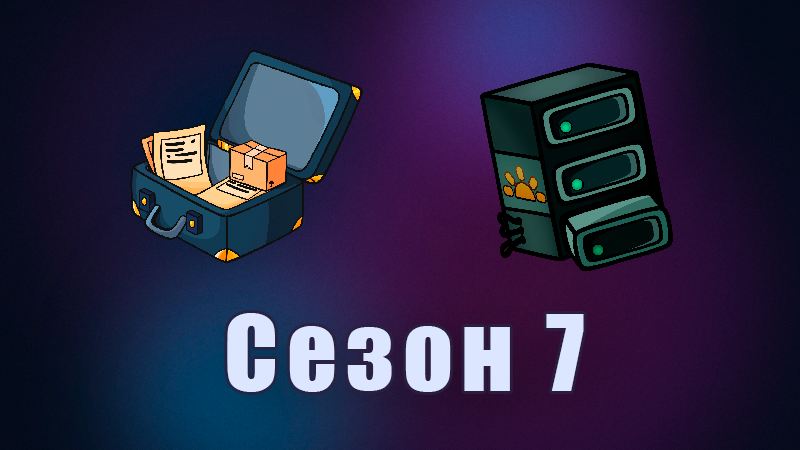
<style>
.page{position:relative;width:800px;height:450px}
.page>*{position:absolute;margin:0}
.t1{font:98.4px "Impact";letter-spacing:0.08em;color:#dde6ff}
</style>
<div class="page">
<p class="t1" style="left:227px;top:313px;width:357px;height:79px">Сезон 7</p>
</div>
